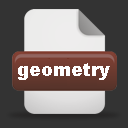
<style>
.page{position:relative;width:128px;height:128px;background:#333333}
.page>*{position:absolute;margin:0}
.t1{font:18px "Arial-Black";color:#ffffff}
</style>
<div class="page">
<p class="t1" style="left:18px;top:63px;width:92px;height:17px">geometry</p>
</div>
